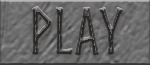
<style>
.page{position:relative;width:150px;height:65px}
.page>*{position:absolute;margin:0}
.t1{font:65px "Norse-Bold";color:#3c3939}
</style>
<div class="page">
<p class="t1" style="left:32px;top:6px;width:92px;height:50px">Play</p>
</div>
